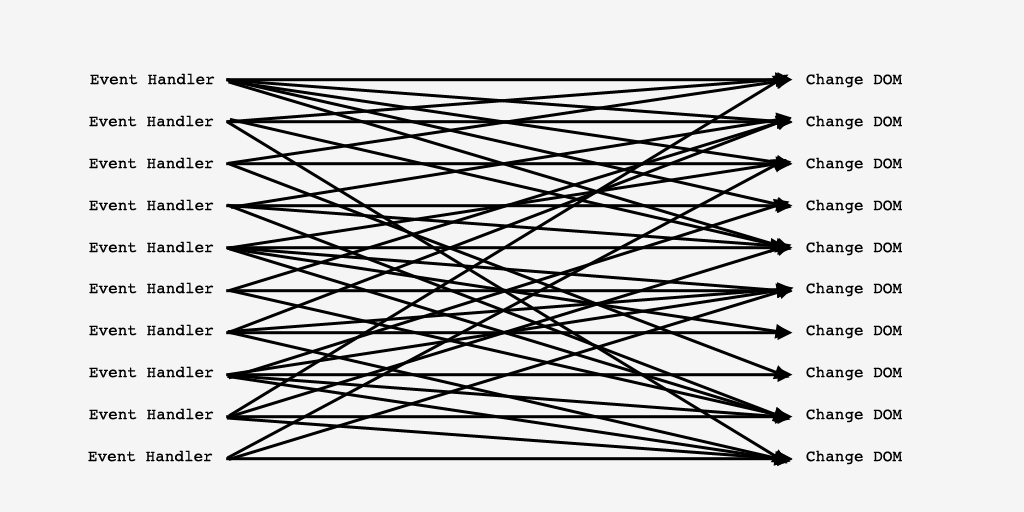
<style>
.page{position:relative;width:1024px;height:512px;background:#f5f5f5}
.page>*{position:absolute;margin:0}
.t1{font:16px "Courier";color:#000000}
</style>
<div class="page">
<p class="t1" style="left:90px;top:73px;width:125px;height:12px">Event Handler</p>
<p class="t1" style="left:806px;top:73px;width:96px;height:15px">Change DOM</p>
<p class="t1" style="left:89px;top:115px;width:125px;height:12px">Event Handler</p>
<p class="t1" style="left:806px;top:115px;width:96px;height:15px">Change DOM</p>
<p class="t1" style="left:89px;top:157px;width:125px;height:12px">Event Handler</p>
<p class="t1" style="left:806px;top:157px;width:96px;height:15px">Change DOM</p>
<p class="t1" style="left:89px;top:199px;width:125px;height:12px">Event Handler</p>
<p class="t1" style="left:806px;top:199px;width:96px;height:15px">Change DOM</p>
<p class="t1" style="left:89px;top:241px;width:125px;height:12px">Event Handler</p>
<p class="t1" style="left:806px;top:241px;width:96px;height:15px">Change DOM</p>
<p class="t1" style="left:89px;top:282px;width:125px;height:12px">Event Handler</p>
<p class="t1" style="left:806px;top:282px;width:96px;height:15px">Change DOM</p>
<p class="t1" style="left:89px;top:324px;width:125px;height:12px">Event Handler</p>
<p class="t1" style="left:806px;top:324px;width:96px;height:15px">Change DOM</p>
<p class="t1" style="left:89px;top:366px;width:125px;height:12px">Event Handler</p>
<p class="t1" style="left:806px;top:366px;width:96px;height:15px">Change DOM</p>
<p class="t1" style="left:89px;top:408px;width:125px;height:12px">Event Handler</p>
<p class="t1" style="left:806px;top:408px;width:96px;height:15px">Change DOM</p>
<p class="t1" style="left:88px;top:450px;width:125px;height:12px">Event Handler</p>
<p class="t1" style="left:806px;top:450px;width:96px;height:15px">Change DOM</p>
</div>
